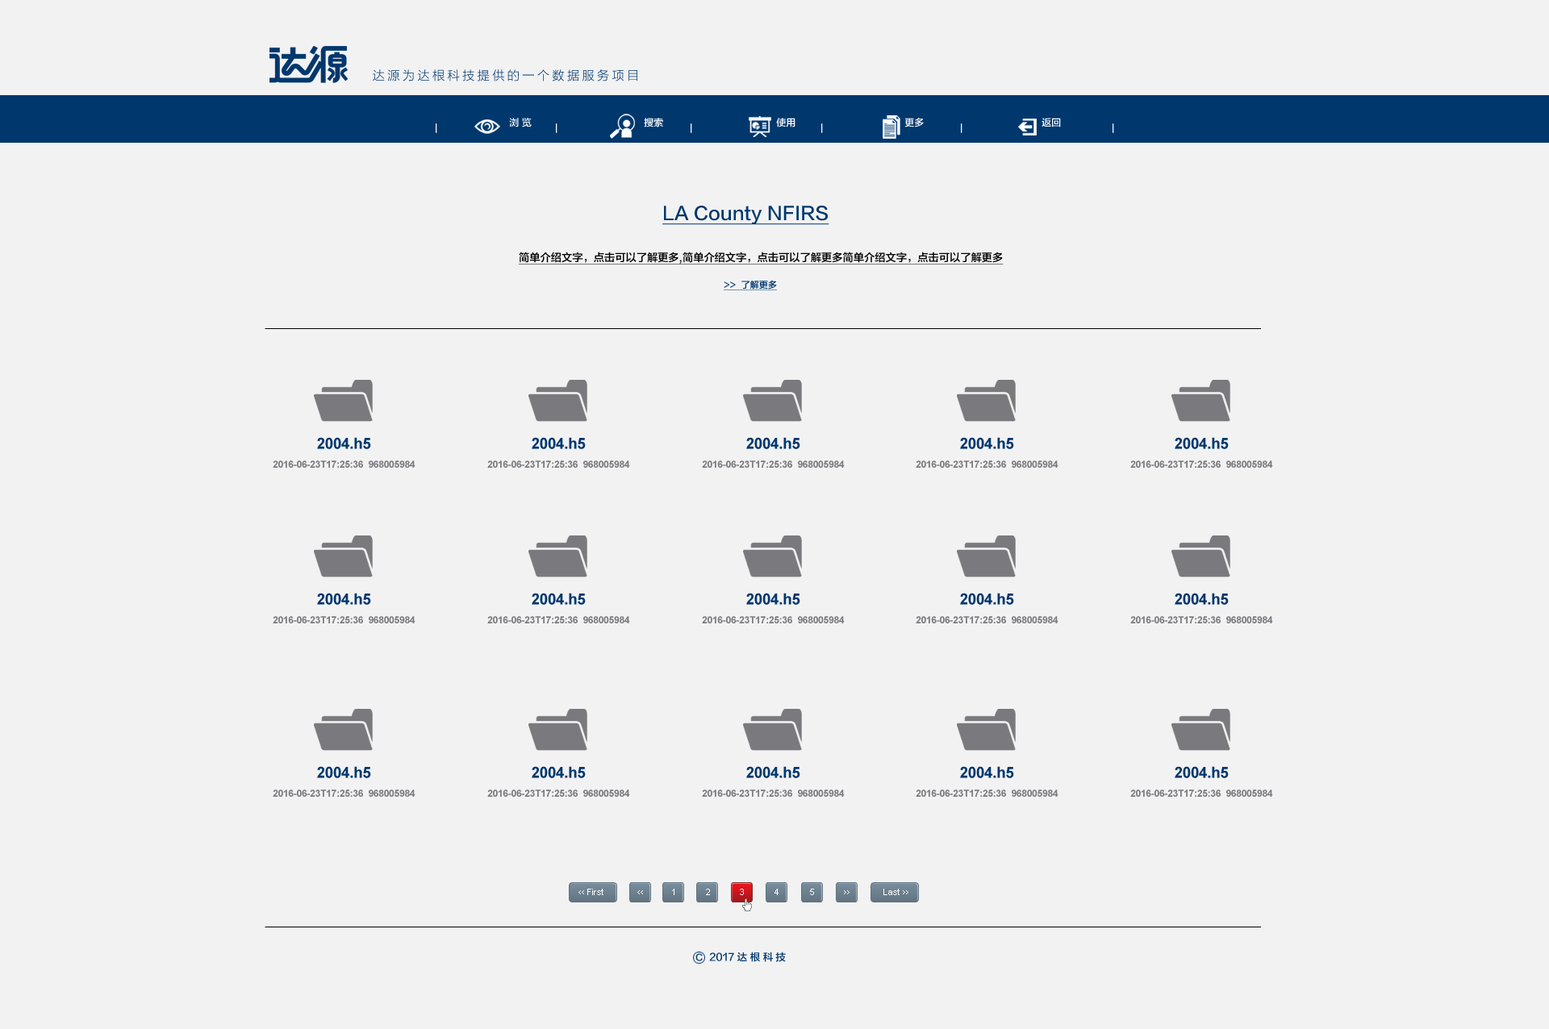
<style>
.page{position:relative;width:1549px;height:1029px;background:#f2f2f3}
.page>*{position:absolute;margin:0}
.t1{font:12.3px "FZLTXHK--GBK1-0";letter-spacing:0.22em;color:#00376d}
.t2{font:9px "FZLTZHK--GBK1-0";color:#ffffff}
.t3{font:9.7px "FZLTZHK--GBK1-0";color:#ffffff}
.t4{font:18px "FZLTZHK--GBK1-0";color:#00376d;text-decoration:underline}
.t5{font:10.7px "FZLTZHK--GBK1-0";color:#000000;text-decoration:underline}
.t6{font:9px "FZLTZHK--GBK1-0";color:#00376d;text-decoration:underline}
.t7{font:8.5px "ArialMT";color:#ffffff;scale:1.04 1}
.t8{font:8.5px "ComicSansMS";color:#ffffff;scale:1.04 1}
.t9{font:9px "FZLTZHK--GBK1-0";letter-spacing:0.28em;color:#00376d}
.t10{font:10px "FZLTZHK--GBK1-0";color:#00376d}
.t11{font:10px "FZLTZHK--GBK1-0";letter-spacing:0.28em;color:#00376d}
</style>
<div class="page">
<p class="t1" style="left:373px;top:69px;width:264px;height:12px">达源为达根科技提供的一个数据服务项目</p>
<p class="t2" style="left:436px;top:123px;width:1px;height:10px">｜</p>
<p class="t3" style="left:509px;top:118px;width:23px;height:9px">浏 览</p>
<p class="t2" style="left:556px;top:123px;width:1px;height:10px">｜</p>
<p class="t3" style="left:644px;top:118px;width:19px;height:9px">搜索</p>
<p class="t2" style="left:690px;top:123px;width:2px;height:10px">｜</p>
<p class="t3" style="left:776px;top:118px;width:19px;height:9px">使用</p>
<p class="t2" style="left:821px;top:123px;width:2px;height:10px">｜</p>
<p class="t3" style="left:904px;top:118px;width:20px;height:9px">更多</p>
<p class="t2" style="left:961px;top:123px;width:1px;height:10px">｜</p>
<p class="t3" style="left:1041px;top:118px;width:20px;height:9px">返回</p>
<p class="t2" style="left:1112px;top:123px;width:2px;height:10px">｜</p>
<p class="t4" style="left:662px;top:206px;width:167px;height:19px">LA County NFIRS</p>
<p class="t5" style="left:519px;top:252px;width:484px;height:13px">简单介绍文字，点击可以了解更多,简单介绍文字，点击可以了解更多简单介绍文字，点击可以了解更多</p>
<p class="t6" style="left:724px;top:280px;width:53px;height:10px">&gt;&gt;  了解更多</p>
<p class="t7" style="left:578px;top:889px;width:25px;height:6px"><span class="t8">&lt;&lt; </span>First</p>
<p class="t8" style="left:637px;top:891px;width:6px;height:4px">&lt;&lt;</p>
<p class="t7" style="left:672px;top:889px;width:2px;height:6px">1</p>
<p class="t7" style="left:706px;top:889px;width:4px;height:6px">2</p>
<p class="t7" style="left:740px;top:889px;width:4px;height:6px">3</p>
<p class="t7" style="left:774px;top:889px;width:4px;height:6px">4</p>
<p class="t7" style="left:810px;top:889px;width:4px;height:6px">5</p>
<p class="t8" style="left:844px;top:891px;width:5px;height:4px">&gt;&gt;</p>
<p class="t7" style="left:883px;top:889px;width:25px;height:6px">Last <span class="t8">&gt;&gt;</span></p>
<p class="t9" style="left:695px;top:953px;width:8px;height:9px">C</p>
<p class="t10" style="left:709px;top:952px;width:77px;height:10px">2017 <span class="t11">达根科技</span></p>
</div>
